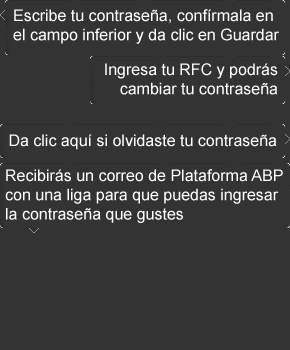
<style>
.page{position:relative;width:290px;height:350px;background:#333333}
.page>*{position:absolute;margin:0}
.t1{font:16px "ArialMT";color:#ffffff}
</style>
<div class="page">
<p class="t1" style="left:13px;top:9px;width:266px;height:35px">Escribe tu contraseña, confírmala en<br>el campo inferior y da clic en Guardar</p>
<p class="t1" style="left:105px;top:63px;width:173px;height:32px;text-align:right">Ingresa tu RFC y podrás<br>cambiar tu contraseña</p>
<p class="t1" style="left:9px;top:134px;width:268px;height:16px">Da clic aquí si olvidaste tu contraseña</p>
<p class="t1" style="left:5px;top:169px;width:278px;height:54px">Recibirás un correo de Plataforma ABP<br>con una liga para que puedas ingresar<br>la contraseña que gustes</p>
</div>
